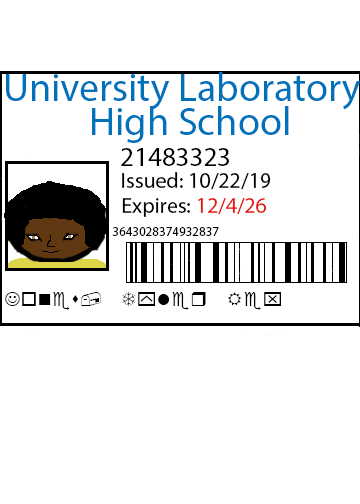
<style>
.page{position:relative;width:360px;height:504px;background:#ffffff}
.page>*{position:absolute;margin:0}
.t1{font:40px "MyriadPro-Regular";color:#0072bc}
.t2{font:27px "MyriadPro-Regular";color:#000000}
.t3{font:22px "MyriadPro-Regular";color:#000000}
.t4{font:22px "MyriadPro-Regular";color:#e31608}
.t5{font:13px "MyriadPro-Regular";color:#000000}
</style>
<div class="page">
<p class="t1" style="left:6px;top:72px;width:355px;height:38px">University Laboratory</p>
<p class="t1" style="left:92px;top:106px;width:197px;height:37px">High School</p>
<p class="t2" style="left:121px;top:148px;width:108px;height:18px">21483323</p>
<p class="t3" style="left:122px;top:172px;width:149px;height:18px">Issued: 10/22/19</p>
<p class="t3" style="left:122px;top:198px;width:145px;height:19px">Expires: <span class="t4">12/4/26</span></p>
<p class="t5" style="left:112px;top:227px;width:107px;height:9px">3643028374932837</p>
</div>
